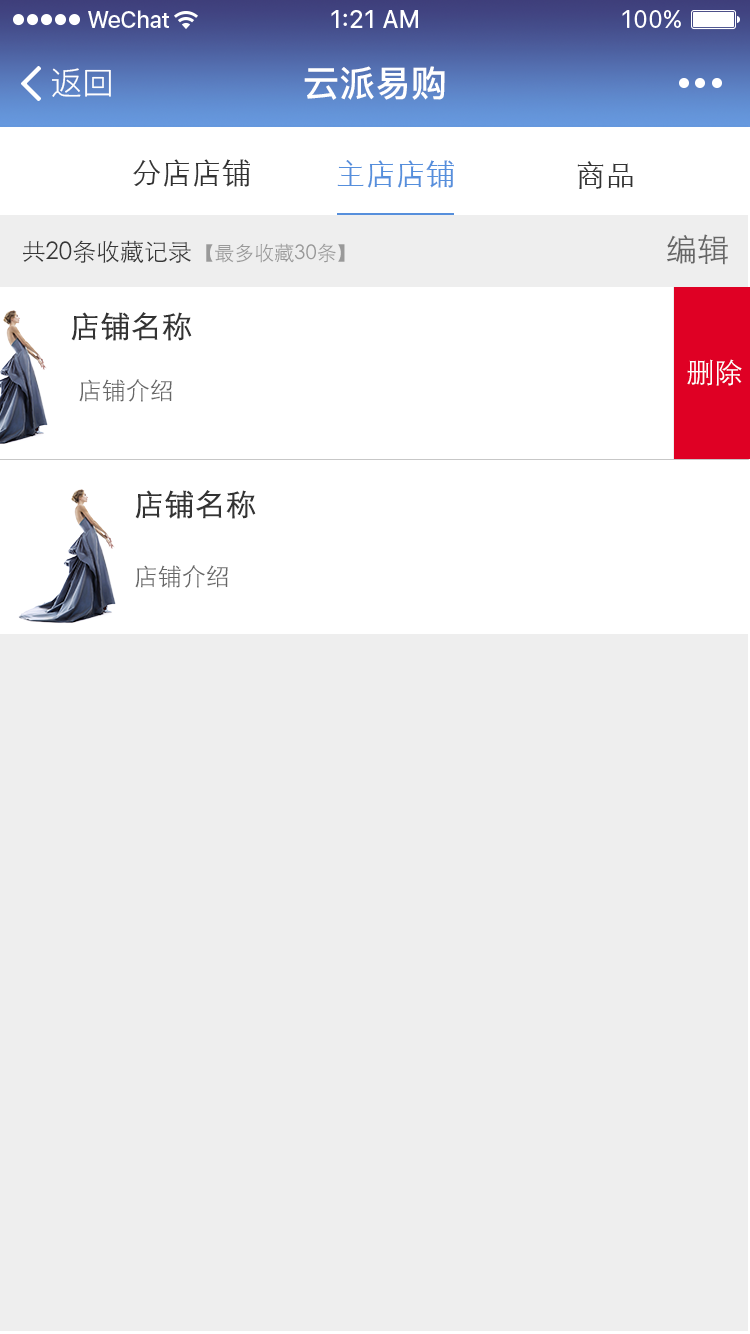
<style>
.page{position:relative;width:750px;height:1334px;background:#eeeeee}
.page>*{position:absolute;margin:0}
.t1{font:32px "PingFang-SC-Regular";color:#ffffff}
.t2{font:36px "PingFang-SC-Bold";color:#ffffff}
.t3{font:30px "STXihei";color:#333333}
.t4{font:30px "STXihei";color:#568fdc}
.t5{font:24px "STXihei";color:#373737}
.t6{font:20px "STXihei";color:#999999}
.t7{font:32px "STXihei";color:#666666}
.t8{font:30px "STXihei";color:#333333;font-weight:bold}
.t9{font:28px "STXihei";color:#ffffff}
.t10{font:24px "STXihei";color:#666666}
</style>
<div class="page">
<p class="t1" style="left:52px;top:68px;width:59px;height:29px">返回</p>
<p class="t2" style="left:304px;top:66px;width:141px;height:34px">云派易购</p>
<p class="t3" style="left:133px;top:159px;width:117px;height:28px">分店店铺</p>
<p class="t4" style="left:337px;top:160px;width:117px;height:28px">主店店铺</p>
<p class="t3" style="left:577px;top:161px;width:56px;height:28px">商品</p>
<p class="t5" style="left:23px;top:240px;width:168px;height:23px">共20条收藏记录</p>
<p class="t6" style="left:206px;top:243px;width:139px;height:20px">【最多收藏30条】</p>
<p class="t7" style="left:667px;top:234px;width:61px;height:31px">编辑</p>
<p class="t8" style="left:71px;top:312px;width:121px;height:29px">店铺名称</p>
<p class="t9" style="left:687px;top:359px;width:55px;height:27px">删除</p>
<p class="t10" style="left:79px;top:379px;width:93px;height:23px">店铺介绍</p>
<p class="t8" style="left:135px;top:490px;width:121px;height:29px">店铺名称</p>
<p class="t10" style="left:135px;top:565px;width:93px;height:23px">店铺介绍</p>
</div>
